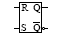
<style>
.page{position:relative;width:60px;height:35px;background:#ffffff}
.page>*{position:absolute;margin:0}
.t1{font:10px "TimesNewRomanPSMT";color:#000000;font-variant:small-caps}
</style>
<div class="page">
<p class="t1" style="left:21px;top:4px;width:8px;height:7px">R</p>
<p class="t1" style="left:33px;top:4px;width:8px;height:9px">Q</p>
<p class="t1" style="left:21px;top:24px;width:6px;height:7px">S</p>
<p class="t1" style="left:33px;top:24px;width:8px;height:9px">Q</p>
</div>
